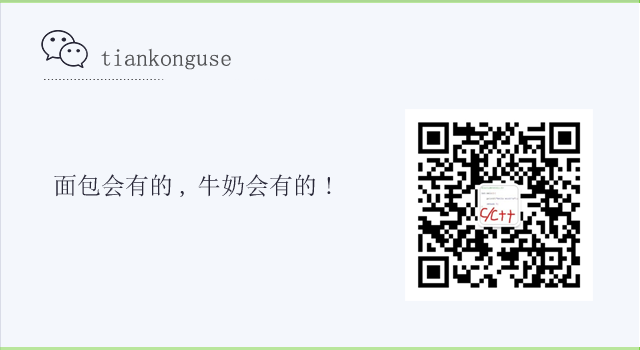
<style>
.page{position:relative;width:640px;height:350px;background:#f4f7fc}
.page>*{position:absolute;margin:0}
.t1{font:24px "NSimSun";color:#535456}
.t2{font:24px "NSimSun";color:#282737}
</style>
<div class="page">
<p class="t1" style="left:101px;top:48px;width:130px;height:22px">tiankonguse</p>
<p class="t2" style="left:54px;top:174px;width:277px;height:23px">面包会有的,牛奶会有的!</p>
</div>
